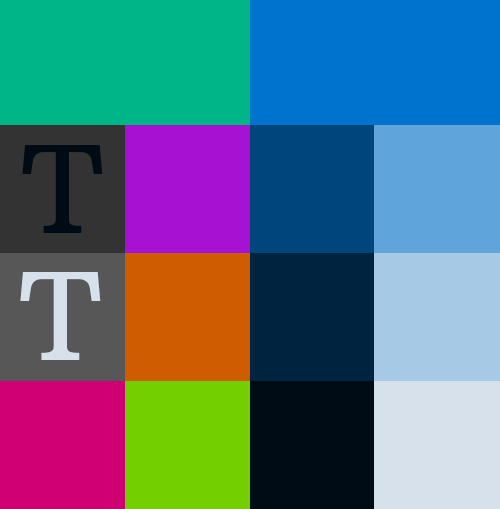
<style>
.page{position:relative;width:500px;height:509px}
.page>*{position:absolute;margin:0}
.t1{font:120px "ArbutusSlab-Regular";letter-spacing:-0.01em;color:#000c15}
.t2{font:120px "ArbutusSlab-Regular";letter-spacing:-0.01em;color:#d6e1eb}
</style>
<div class="page">
<p class="t1" style="left:22px;top:145px;width:81px;height:88px">T</p>
<p class="t2" style="left:20px;top:272px;width:81px;height:88px">T</p>
</div>
